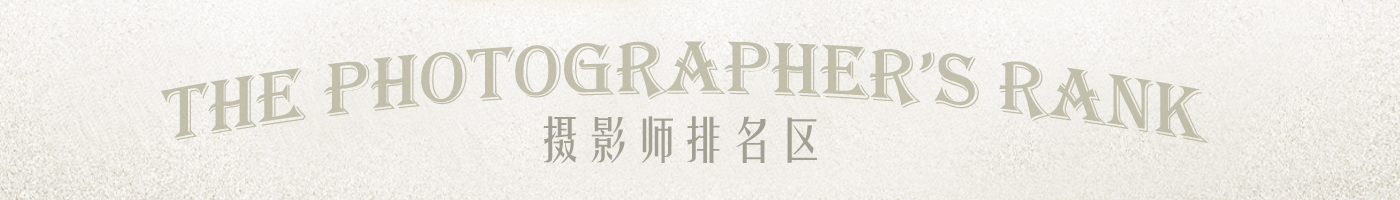
<style>
.page{position:relative;width:1400px;height:200px}
.page>*{position:absolute;margin:0}
.t1{font:78px "Algerian";color:#c2c0ab}
.t2{font:48px "FZYTK--GBK1-0";color:#a1a092}
</style>
<div class="page">
<p class="t1" style="left:161px;top:41px;width:1048px;height:102px">The Photographer’s Rank</p>
<p class="t2" style="left:543px;top:116px;width:274px;height:47px">摄影师排名区</p>
</div>
